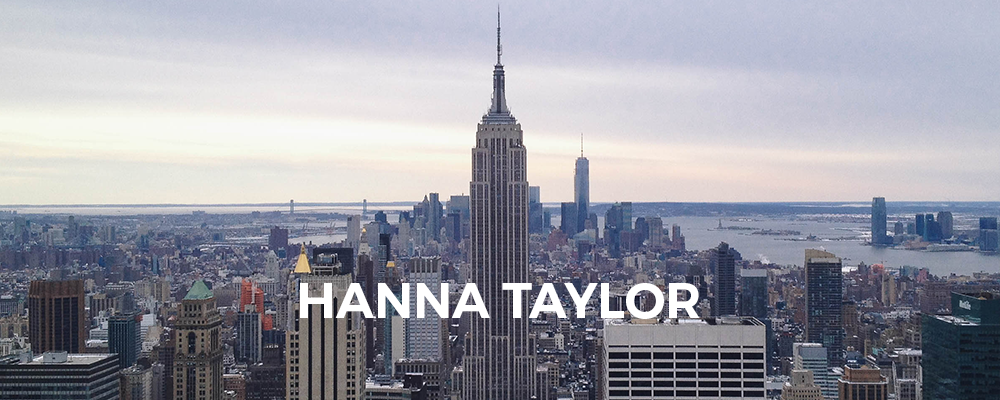
<style>
.page{position:relative;width:1000px;height:400px}
.page>*{position:absolute;margin:0}
.t1{font:50px "Montserrat-SemiBold";color:#ffffff}
</style>
<div class="page">
<p class="t1" style="left:300px;top:283px;width:400px;height:36px">HANNA TAYLOR</p>
</div>
